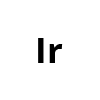
<style>
.page{position:relative;width:100px;height:100px;background:#ffffff}
.page>*{position:absolute;margin:0}
.t1{font:35px "OpenSans-Bold";color:#000000}
</style>
<div class="page">
<p class="t1" style="left:38px;top:38px;width:25px;height:25px">Ir</p>
</div>
